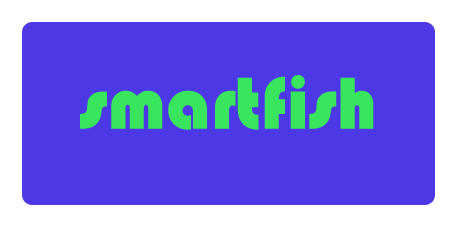
<style>
.page{position:relative;width:454px;height:227px;background:#4c38e5}
.page>*{position:absolute;margin:0}
.t1{font:76px "STHupo";color:#38e55c}
</style>
<div class="page">
<p class="t1" style="left:80px;top:75px;width:294px;height:55px">smartfish</p>
</div>
